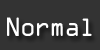
<style>
.page{position:relative;width:100px;height:50px;background:#333333}
.page>*{position:absolute;margin:0}
.t1{font:23.9px "OCRAStd";letter-spacing:-0.1em;color:#ffffff}
</style>
<div class="page">
<p class="t1" style="left:7px;top:17px;width:85px;height:19px">Normal</p>
</div>
